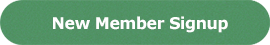
<style>
.page{position:relative;width:270px;height:45px}
.page>*{position:absolute;margin:0}
.t1{font:16.1px "Verdana-Bold";letter-spacing:-0.025em;color:#fefefe}
</style>
<div class="page">
<p class="t1" style="left:53px;top:16px;width:175px;height:17px">New Member Signup</p>
</div>
